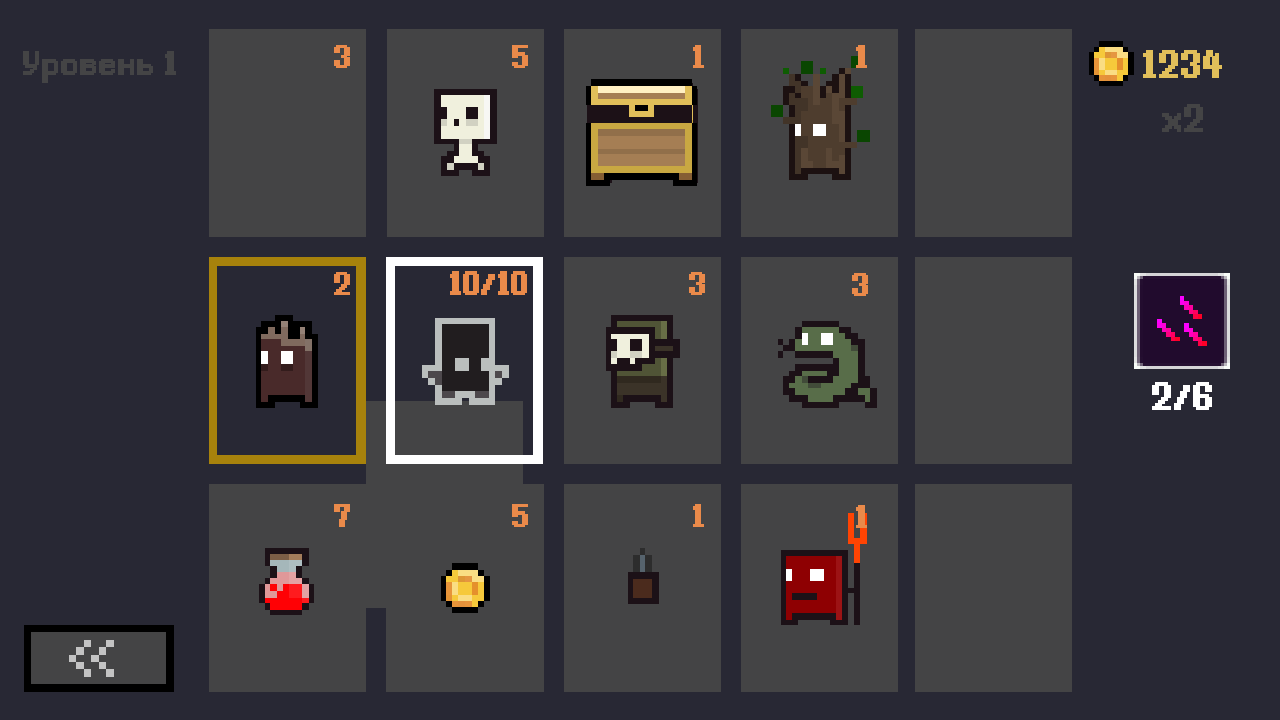
<style>
.page{position:relative;width:1280px;height:720px;background:#282834}
.page>*{position:absolute;margin:0}
.t1{font:20px "Gnomoria_rus";color:#444445;font-weight:bold}
.t2{font:19.6px "Gnomoria_rus";color:#ea8a4a;font-weight:bold}
.t3{font:24px "Gnomoria_rus";color:#e1bf5a;font-weight:bold}
.t4{font:24px "Gnomoria_rus";color:#444445;font-weight:bold}
.t5{font:19.8px "Gnomoria_rus";color:#ea8a4a;font-weight:bold}
.t6{font:24px "Gnomoria_rus";color:#ffffff;font-weight:bold}
</style>
<div class="page">
<p class="t1" style="left:23px;top:51px;width:153px;height:32px">Уровень 1</p>
<p class="t2" style="left:334px;top:45px;width:16px;height:23px">3</p>
<p class="t2" style="left:512px;top:45px;width:16px;height:23px">5</p>
<p class="t2" style="left:693px;top:45px;width:11px;height:23px">1</p>
<p class="t2" style="left:856px;top:45px;width:11px;height:23px">1</p>
<p class="t3" style="left:1143px;top:50px;width:79px;height:28px">1234</p>
<p class="t4" style="left:1162px;top:104px;width:41px;height:28px">x2</p>
<p class="t2" style="left:334px;top:272px;width:16px;height:23px">2</p>
<p class="t5" style="left:450px;top:271px;width:77px;height:24px">10/10</p>
<p class="t2" style="left:689px;top:272px;width:16px;height:23px">3</p>
<p class="t2" style="left:852px;top:273px;width:16px;height:23px">3</p>
<p class="t6" style="left:1152px;top:382px;width:60px;height:28px">2/6</p>
<p class="t2" style="left:334px;top:504px;width:16px;height:23px">7</p>
<p class="t2" style="left:512px;top:504px;width:16px;height:23px">5</p>
<p class="t2" style="left:693px;top:504px;width:11px;height:23px">1</p>
<p class="t2" style="left:856px;top:505px;width:11px;height:23px">1</p>
</div>
